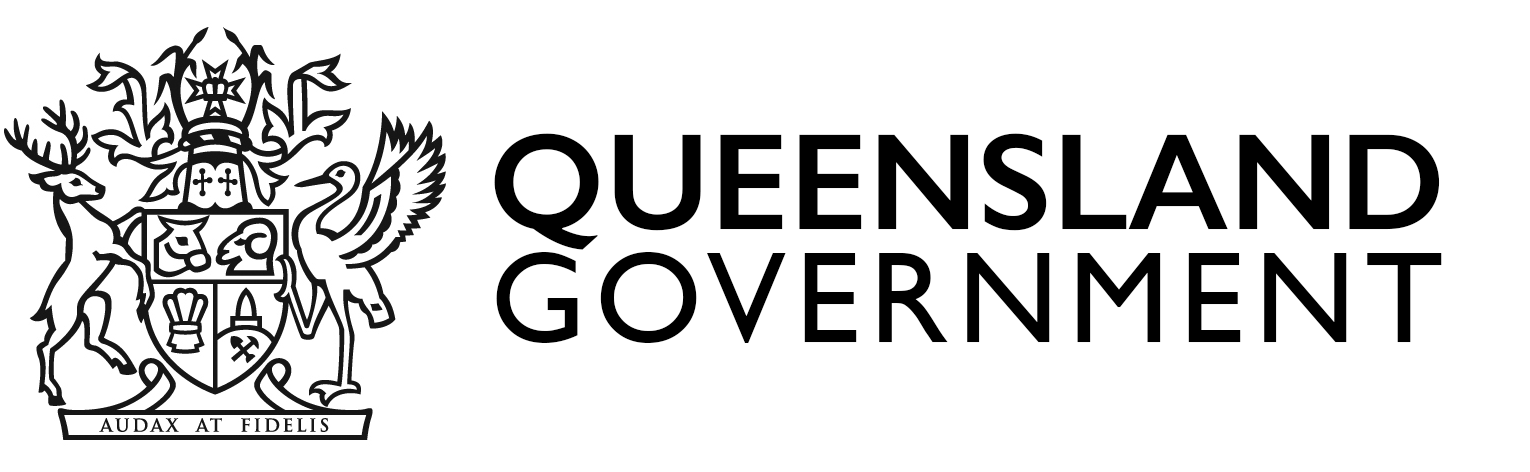
<style>
.page{position:relative;width:1530px;height:472px;background:#ffffff}
.page>*{position:absolute;margin:0}
.t1{font:138px "GillSans-SemiBold";color:#000000}
.t2{font:130px "GillSans";letter-spacing:0.073em;color:#000000}
</style>
<div class="page">
<p class="t1" style="left:494px;top:133px;width:946px;height:117px">QUEENSLAND</p>
<p class="t2" style="left:496px;top:252px;width:946px;height:91px">GOVERNMENT</p>
</div>
